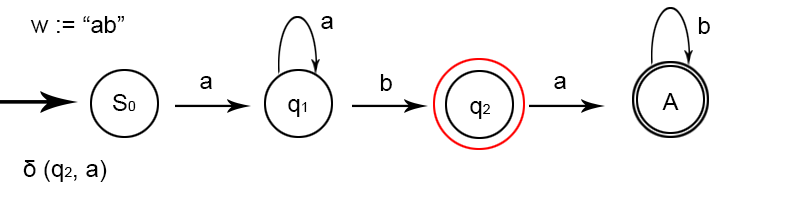
<style>
.page{position:relative;width:800px;height:200px;background:#ffffff}
.page>*{position:absolute;margin:0}
.t1{font:24px "ArialMT";color:#000000}
.t2{font:14px "ArialMT";color:#000000}
</style>
<div class="page">
<p class="t1" style="left:30px;top:16px;width:94px;height:17px">w := “ab”</p>
<p class="t1" style="left:321px;top:16px;width:12px;height:13px">a</p>
<p class="t1" style="left:698px;top:17px;width:12px;height:17px">b</p>
<p class="t1" style="left:200px;top:76px;width:12px;height:13px">a</p>
<p class="t1" style="left:380px;top:74px;width:12px;height:17px">b</p>
<p class="t1" style="left:554px;top:76px;width:12px;height:13px">a</p>
<p class="t1" style="left:113px;top:94px;width:23px;height:17px">S<span class="t2">0</span></p>
<p class="t1" style="left:288px;top:99px;width:19px;height:18px">q<span class="t2">1</span></p>
<p class="t1" style="left:470px;top:101px;width:20px;height:18px">q<span class="t2">2</span></p>
<p class="t1" style="left:662px;top:93px;width:17px;height:17px">A</p>
<p class="t1" style="left:23px;top:160px;width:84px;height:22px">δ (q<span class="t2">2</span>, a)</p>
</div>
